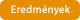
<style>
.page{position:relative;width:80px;height:20px;background:#e68d00}
.page>*{position:absolute;margin:0}
.t1{font:11px "MyriadPro-Semibold";color:#ffffff}
</style>
<div class="page">
<p class="t1" style="left:11px;top:5px;width:60px;height:11px">Eredmények</p>
</div>
